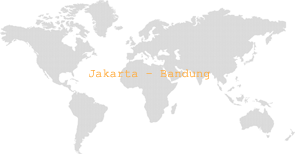
<style>
.page{position:relative;width:295px;height:154px;background:#ffffff}
.page>*{position:absolute;margin:0}
.t1{font:12px "CourierNewPSMT";color:#ffad41}
</style>
<div class="page">
<p class="t1" style="left:89px;top:69px;width:121px;height:11px">Jakarta - Bandung</p>
</div>
